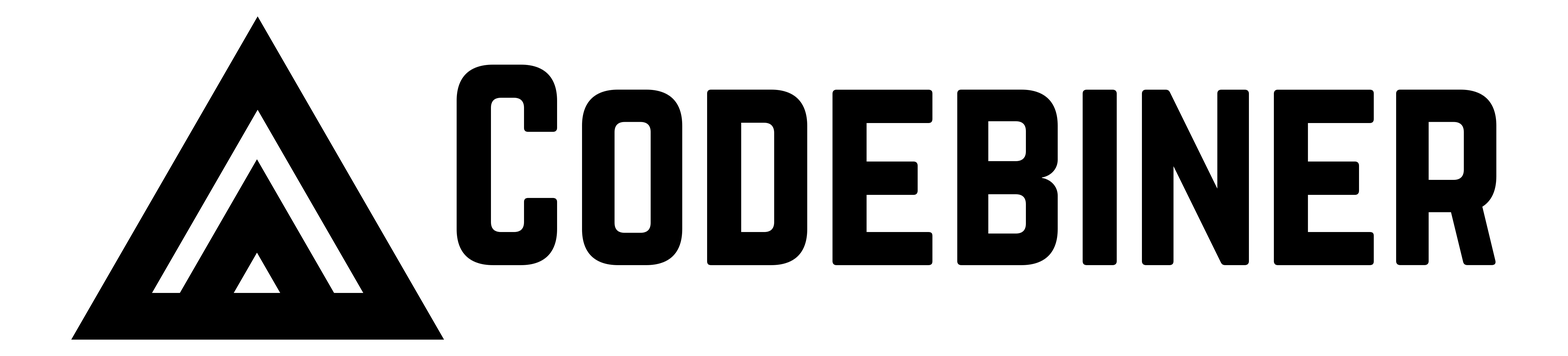
<style>
.page{position:relative;width:1568px;height:356px;background:#ffffff}
.page>*{position:absolute;margin:0}
.t1{font:250.3px "Norwester-Regular";color:#000000}
</style>
<div class="page">
<p class="t1" style="left:457px;top:65px;width:1040px;height:200px">Codebiner</p>
</div>
